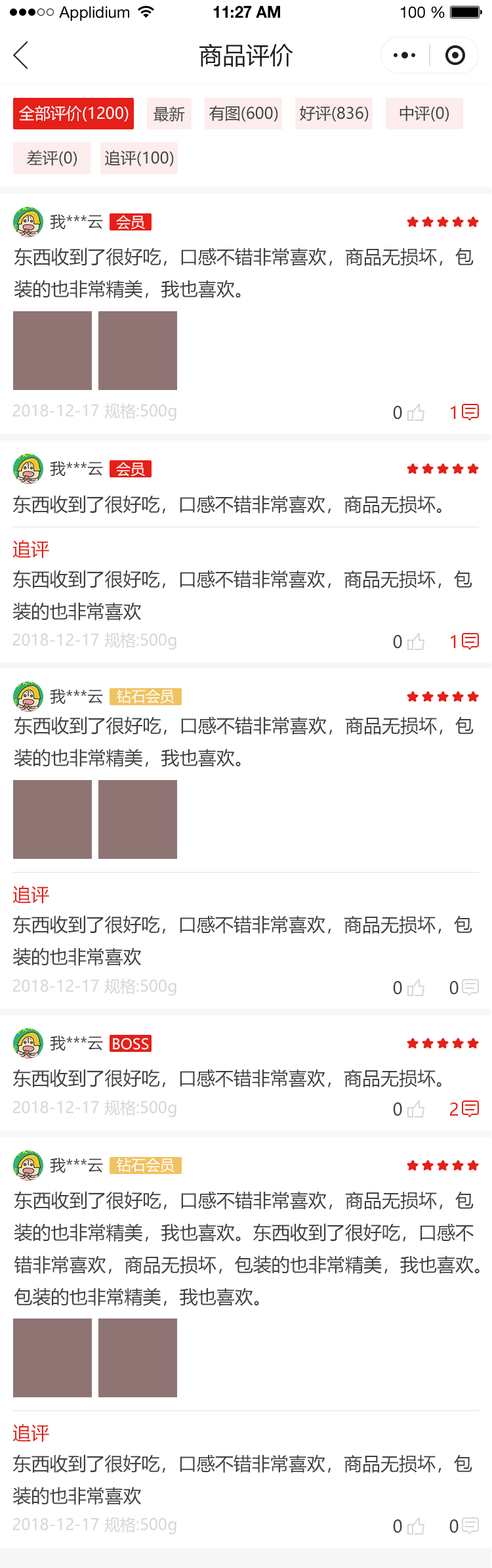
<style>
.page{position:relative;width:492px;height:1568px;background:#ffffff}
.page>*{position:absolute;margin:0}
.t1{font:15.8px "HelveticaNeueLTStd-Roman";color:#000000}
.t2{font:15.8px "HelveticaNeueLTStd-Bd";color:#000000}
.t3{font:23.6px "MicrosoftYaHei";color:#202020;text-transform:uppercase}
.t4{font:15.8px "MicrosoftYaHei";color:#ffffff;text-transform:uppercase}
.t5{font:15.8px "MicrosoftYaHei";color:#404040;text-transform:uppercase}
.t6{font:15.8px "MicrosoftYaHei";letter-spacing:0.001em;color:#404040;text-transform:uppercase}
.t7{font:14.4px "MicrosoftYaHei";letter-spacing:0.001em;color:#ffffff;text-transform:uppercase}
.t8{font:18.4px "MicrosoftYaHei";letter-spacing:0.001em;color:#404040;text-transform:uppercase}
.t9{font:15.8px "MicrosoftYaHei";letter-spacing:0.001em;color:#d6d6d6}
.t10{font:17.1px "MicrosoftYaHei";letter-spacing:0.001em;color:#404040}
.t11{font:17.1px "MicrosoftYaHei";letter-spacing:0.001em;color:#e61f18}
.t12{font:18.4px "MicrosoftYaHei";letter-spacing:0.001em;color:#e61f18;text-transform:uppercase}
</style>
<div class="page">
<p class="t1" style="left:59px;top:6px;width:70px;height:15px">Applidium</p>
<p class="t2" style="left:213px;top:6px;width:67px;height:12px">11:27 AM</p>
<p class="t1" style="left:401px;top:6px;width:44px;height:12px">100 %</p>
<p class="t3" style="left:200px;top:43px;width:94px;height:24px">商品评价</p>
<p class="t4" style="left:19px;top:106px;width:110px;height:15px">全部评价(1200)</p>
<p class="t5" style="left:154px;top:106px;width:31px;height:16px">最新</p>
<p class="t5" style="left:209px;top:106px;width:69px;height:15px">有图(600)</p>
<p class="t5" style="left:300px;top:106px;width:69px;height:15px">好评(836)</p>
<p class="t5" style="left:400px;top:106px;width:49px;height:15px">中评(0)</p>
<p class="t5" style="left:27px;top:150px;width:50px;height:16px">差评(0)</p>
<p class="t5" style="left:105px;top:150px;width:69px;height:16px">追评(100)</p>
<p class="t6" style="left:50px;top:214px;width:53px;height:15px">我***云</p>
<p class="t7" style="left:116px;top:215px;width:29px;height:15px">会员</p>
<p class="t8" style="left:14px;top:248px;width:460px;height:50px">东西收到了很好吃，口感不错非常喜欢，商品无损坏，包<br>装的也非常精美，我也喜欢。</p>
<p class="t9" style="left:12px;top:403px;width:165px;height:18px">2018-12-17 规格:500g</p>
<p class="t10" style="left:393px;top:406px;width:10px;height:14px">0</p>
<p class="t11" style="left:451px;top:406px;width:5px;height:13px">1</p>
<p class="t6" style="left:50px;top:461px;width:53px;height:15px">我***云</p>
<p class="t7" style="left:116px;top:462px;width:29px;height:15px">会员</p>
<p class="t8" style="left:12px;top:495px;width:430px;height:18px">东西收到了很好吃，口感不错非常喜欢，商品无损坏。</p>
<p class="t12" style="left:12px;top:540px;width:37px;height:18px">追评</p>
<p class="t8" style="left:12px;top:570px;width:461px;height:51px">东西收到了很好吃，口感不错非常喜欢，商品无损坏，包<br>装的也非常喜欢</p>
<p class="t9" style="left:12px;top:632px;width:165px;height:18px">2018-12-17 规格:500g</p>
<p class="t10" style="left:393px;top:635px;width:10px;height:14px">0</p>
<p class="t11" style="left:451px;top:635px;width:5px;height:13px">1</p>
<p class="t6" style="left:50px;top:689px;width:53px;height:15px">我***云</p>
<p class="t7" style="left:117px;top:689px;width:58px;height:15px">钻石会员</p>
<p class="t8" style="left:14px;top:716px;width:460px;height:51px">东西收到了很好吃，口感不错非常喜欢，商品无损坏，包<br>装的也非常精美，我也喜欢。</p>
<p class="t12" style="left:12px;top:885px;width:37px;height:19px">追评</p>
<p class="t8" style="left:12px;top:915px;width:461px;height:51px">东西收到了很好吃，口感不错非常喜欢，商品无损坏，包<br>装的也非常喜欢</p>
<p class="t9" style="left:12px;top:978px;width:165px;height:18px">2018-12-17 规格:500g</p>
<p class="t10" style="left:393px;top:981px;width:10px;height:14px">0</p>
<p class="t10" style="left:450px;top:981px;width:9px;height:14px">0</p>
<p class="t6" style="left:50px;top:1035px;width:53px;height:16px">我***云</p>
<p class="t7" style="left:113px;top:1038px;width:36px;height:12px">BOSS</p>
<p class="t8" style="left:12px;top:1069px;width:430px;height:18px">东西收到了很好吃，口感不错非常喜欢，商品无损坏。</p>
<p class="t9" style="left:12px;top:1100px;width:165px;height:18px">2018-12-17 规格:500g</p>
<p class="t10" style="left:393px;top:1102px;width:10px;height:14px">0</p>
<p class="t11" style="left:450px;top:1102px;width:9px;height:14px">2</p>
<p class="t6" style="left:50px;top:1158px;width:53px;height:15px">我***云</p>
<p class="t7" style="left:117px;top:1158px;width:58px;height:15px">钻石会员</p>
<p class="t8" style="left:14px;top:1191px;width:466px;height:115px">东西收到了很好吃，口感不错非常喜欢，商品无损坏，包<br>装的也非常精美，我也喜欢。东西收到了很好吃，口感不<br>错非常喜欢，商品无损坏，包装的也非常精美，我也喜欢。<br>包装的也非常精美，我也喜欢。</p>
<p class="t12" style="left:12px;top:1424px;width:37px;height:18px">追评</p>
<p class="t8" style="left:12px;top:1454px;width:461px;height:51px">东西收到了很好吃，口感不错非常喜欢，商品无损坏，包<br>装的也非常喜欢</p>
<p class="t9" style="left:12px;top:1517px;width:165px;height:18px">2018-12-17 规格:500g</p>
<p class="t10" style="left:393px;top:1519px;width:10px;height:14px">0</p>
<p class="t10" style="left:450px;top:1519px;width:9px;height:14px">0</p>
</div>
